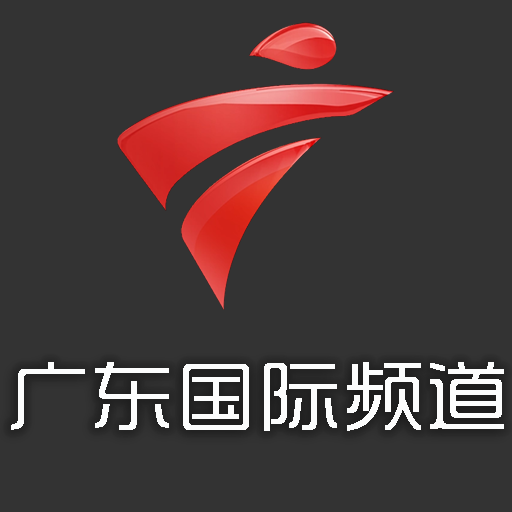
<style>
.page{position:relative;width:512px;height:512px;background:#333333}
.page>*{position:absolute;margin:0}
.t1{font:80px "SJshishang-Regular";letter-spacing:0.02em;color:#fcfdfd;font-weight:bold}
</style>
<div class="page">
<p class="t1" style="left:11px;top:362px;width:493px;height:69px">广东国际频道</p>
</div>
